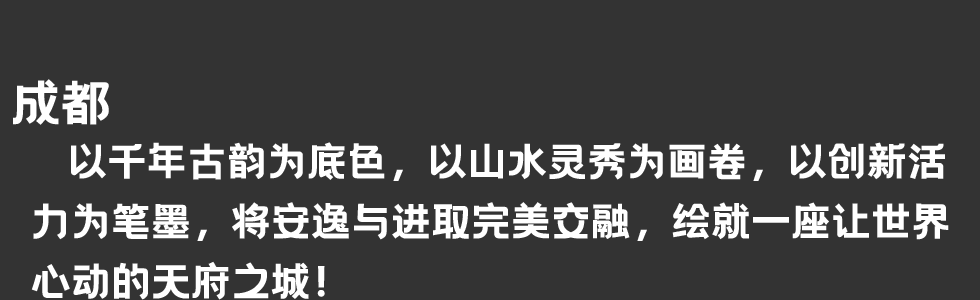
<style>
.page{position:relative;width:980px;height:300px;background:#333333}
.page>*{position:absolute;margin:0}
.t1{font:50px "HelloFont-WenYiHei";color:#ffffff}
.t2{font:40px/60px "HelloFont-WenYiHei";color:#ffffff}
</style>
<div class="page">
<p class="t1" style="left:13px;top:79px;width:96px;height:46px">成都</p>
<p class="t2" style="left:31px;top:142px;width:918px;height:158px">以千年古韵为底色，以山水灵秀为画卷，以创新活<br>力为笔墨，将安逸与进取完美交融，绘就一座让世界<br>心动的天府之城！</p>
</div>
